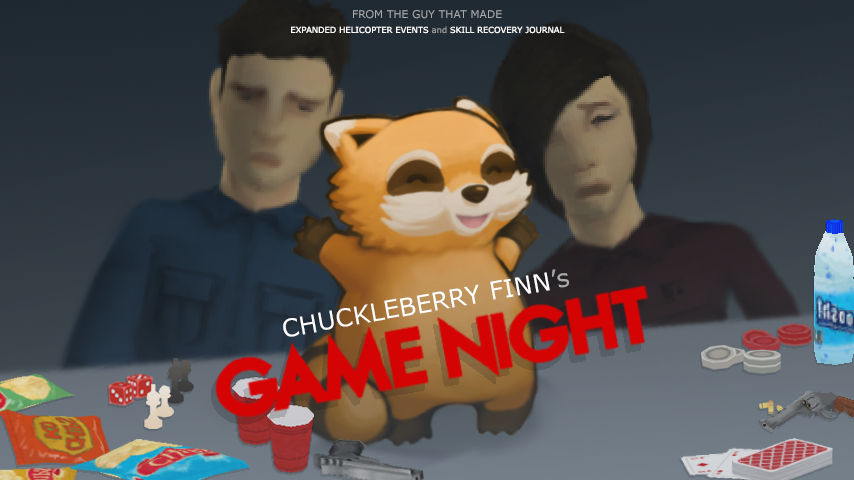
<style>
.page{position:relative;width:854px;height:480px}
.page>*{position:absolute;margin:0}
.t1{font:10.7px "Verdana";color:#a9abad}
.t2{font:8.3px "Verdana";color:#ffffff}
.t3{font:8.3px "Verdana";color:#989898}
.t4{font:25px "Verdana";color:#ffffff}
.t5{font:25px "Verdana";color:#ababab}
</style>
<div class="page">
<p class="t1" style="left:353px;top:10px;width:149px;height:9px">FROM THE GUY THAT MADE</p>
<p class="t2" style="left:291px;top:26px;width:274px;height:8px">EXPANDED HELICOPTER EVENTS <span class="t3">and </span>SKILL RECOVERY JOURNAL</p>
<p class="t4" style="left:283px;top:269px;width:286px;height:68px;rotate:-10deg">CHUCKLEBERRY FINN<span class="t5">’s</span></p>
</div>
